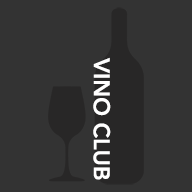
<style>
.page{position:relative;width:192px;height:192px;background:#333333}
.page>*{position:absolute;margin:0}
.t1{font:22.5px "Avenir-Heavy";color:#ffffff}
</style>
<div class="page">
<p class="t1" style="left:93px;top:57px;width:18px;height:123px;rotate:90deg">VINO CLUB</p>
</div>
